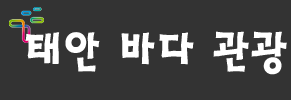
<style>
.page{position:relative;width:291px;height:100px;background:#333333}
.page>*{position:absolute;margin:0}
.t1{font:48px "HaanSaleB";color:#ffffff}
</style>
<div class="page">
<p class="t1" style="left:25px;top:31px;width:262px;height:44px">태안 바다 관광</p>
</div>
